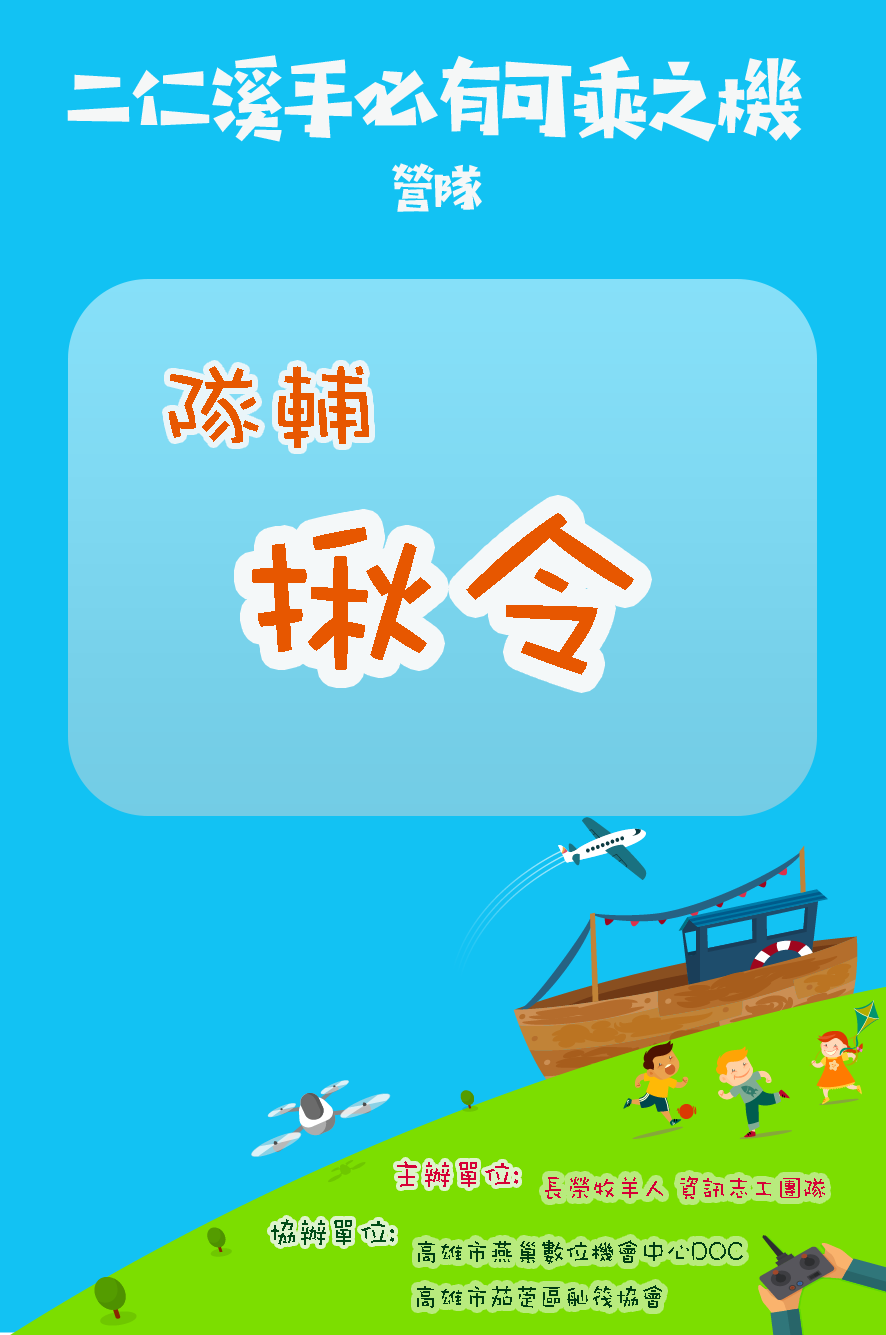
<style>
.page{position:relative;width:886px;height:1335px;background:#12c2f3}
.page>*{position:absolute;margin:0}
.t1{font:108.3px "DFWaWaTC-W5";color:#e75700}
.t2{font:208.3px "DFWaWaTC-W5";color:#e75700}
.t3{font:32.4px "DFWaWaTC-W5";color:#d60036;scale:0.93 1}
.t4{font:27px "DFWaWaTC-W5";color:#d60036;scale:0.93 1}
.t5{font:32.4px "DFWaWaTC-W5";color:#004b17;scale:0.93 1}
.t6{font:27px "DFWaWaTC-W5";color:#003d13;scale:0.93 1}
</style>
<div class="page">
<p class="t1" style="left:168px;top:366px;width:201px;height:82px">隊輔</p>
<p class="t2" style="left:252px;top:513px;width:382px;height:162px">揪令</p>
<p class="t3" style="left:397px;top:1161px;width:121px;height:26px">主辦單位:</p>
<p class="t4" style="left:545px;top:1176px;width:280px;height:23px">長榮牧羊人 資訊志工團隊</p>
<p class="t5" style="left:271px;top:1219px;width:123px;height:26px">協辦單位:</p>
<p class="t6" style="left:418px;top:1240px;width:325px;height:24px">高雄市燕巢數位機會中心DOC</p>
<p class="t6" style="left:417px;top:1285px;width:245px;height:23px">高雄市茄萣區舢筏協會</p>
</div>
